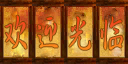
<style>
.page{position:relative;width:128px;height:64px}
.page>*{position:absolute;margin:0}
.t1{font:38.2px "JXC";font-weight:bold;scale:0.67 1}
.t2{font:39.4px "JXC";font-weight:bold;scale:0.67 1}
</style>
<div class="page">
<p class="t1" style="left:5px;top:15px;width:22px;height:34px">欢</p>
<p class="t2" style="left:37px;top:17px;width:21px;height:31px">迎</p>
<p class="t1" style="left:69px;top:16px;width:22px;height:34px">光</p>
<p class="t2" style="left:101px;top:16px;width:22px;height:34px">临</p>
</div>
